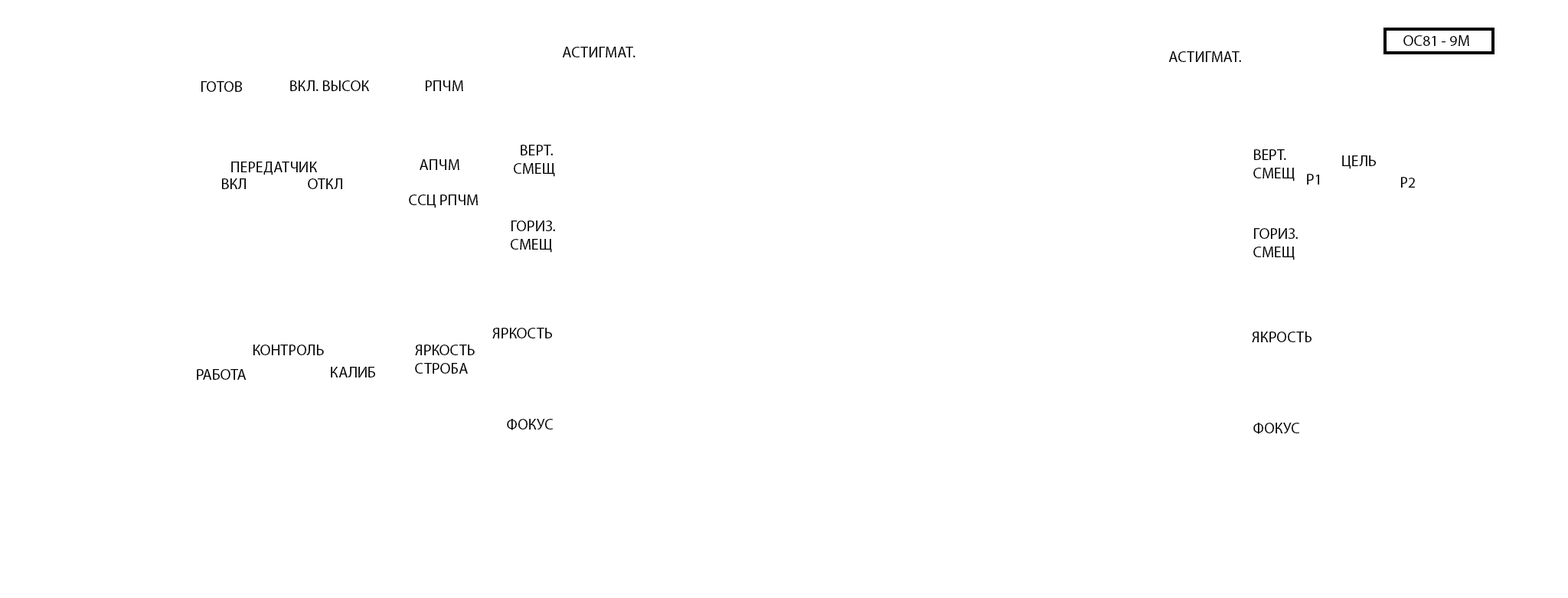
<style>
.page{position:relative;width:1568px;height:598px;background:#ffffff}
.page>*{position:absolute;margin:0}
.t1{font:15.3px "MyriadPro-Regular";color:#000000}
</style>
<div class="page">
<p class="t1" style="left:1403px;top:35px;width:66px;height:11px">ОС81 - 9М</p>
<p class="t1" style="left:562px;top:47px;width:73px;height:10px">АСТИГМАТ.</p>
<p class="t1" style="left:1168px;top:51px;width:73px;height:11px">АСТИГМАТ.</p>
<p class="t1" style="left:201px;top:81px;width:41px;height:11px">ГОТОВ</p>
<p class="t1" style="left:290px;top:80px;width:80px;height:11px">ВКЛ. ВЫСОК</p>
<p class="t1" style="left:426px;top:80px;width:37px;height:11px">РПЧМ</p>
<p class="t1" style="left:514px;top:145px;width:41px;height:32px">ВЕРТ.<br>СМЕЩ</p>
<p class="t1" style="left:1253px;top:149px;width:42px;height:32px">ВЕРТ.<br>СМЕЩ</p>
<p class="t1" style="left:231px;top:162px;width:87px;height:13px">ПЕРЕДАТЧИК</p>
<p class="t1" style="left:420px;top:159px;width:39px;height:11px">АПЧМ</p>
<p class="t1" style="left:1342px;top:155px;width:34px;height:14px">ЦЕЛЬ</p>
<p class="t1" style="left:1307px;top:174px;width:12px;height:11px">Р1</p>
<p class="t1" style="left:222px;top:178px;width:24px;height:11px">ВКЛ</p>
<p class="t1" style="left:308px;top:178px;width:34px;height:11px">ОТКЛ</p>
<p class="t1" style="left:1401px;top:177px;width:14px;height:11px">Р2</p>
<p class="t1" style="left:409px;top:194px;width:69px;height:14px">ССЦ РПЧМ</p>
<p class="t1" style="left:511px;top:220px;width:44px;height:33px">ГОРИЗ.<br>СМЕЩ</p>
<p class="t1" style="left:1253px;top:228px;width:45px;height:32px">ГОРИЗ.<br>СМЕЩ</p>
<p class="t1" style="left:492px;top:328px;width:60px;height:10px">ЯРКОСТЬ</p>
<p class="t1" style="left:1252px;top:332px;width:60px;height:10px">ЯКРОСТЬ</p>
<p class="t1" style="left:253px;top:345px;width:71px;height:10px">КОНТРОЛЬ</p>
<p class="t1" style="left:415px;top:345px;width:60px;height:29px">ЯРКОСТЬ<br>СТРОБА</p>
<p class="t1" style="left:197px;top:369px;width:50px;height:11px">РАБОТА</p>
<p class="t1" style="left:331px;top:367px;width:44px;height:10px">КАЛИБ</p>
<p class="t1" style="left:507px;top:419px;width:47px;height:11px">ФОКУС</p>
<p class="t1" style="left:1253px;top:423px;width:47px;height:11px">ФОКУС</p>
</div>
